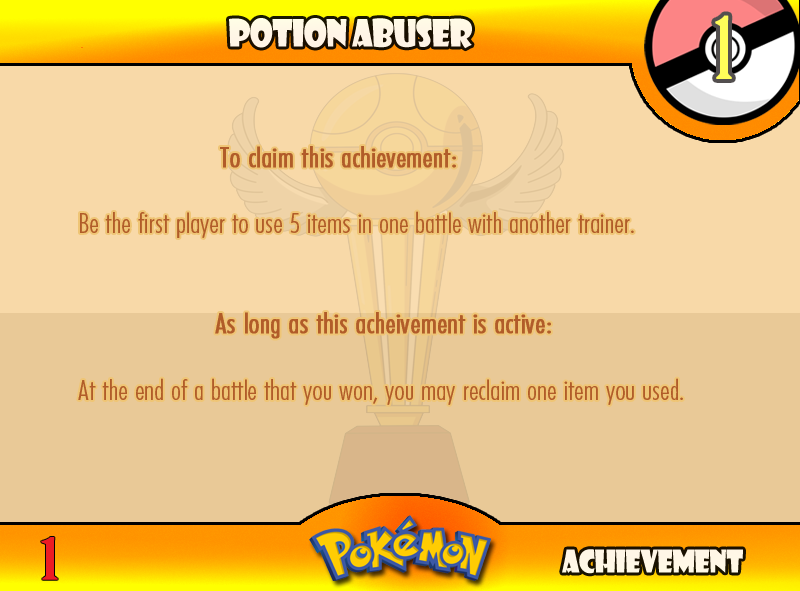
<style>
.page{position:relative;width:800px;height:591px;background:#f8d9a8}
.page>*{position:absolute;margin:0}
.t1{font:83.3px "BirchStd";letter-spacing:0.025em;color:#fffd59;font-weight:bold}
.t2{font:36.7px "ShowcardGothic-Reg";letter-spacing:-0.025em;color:#fff6e6;scale:0.91 1}
.t3{font:27.8px "FuturaCondensedBQ-Light";color:#b15c29;scale:1.08 1}
.t4{font:33.3px "FuturaCondensedBQ-Light";color:#b15c29;font-weight:bold;scale:1.08 1}
.t5{font:27.8px "FuturaCondensedBQ-Light";color:#b15c29;font-weight:bold;scale:1.08 1}
.t6{font:55.6px "BirchStd";color:#ed1c24;font-weight:bold;scale:1.5 1}
.t7{font:30.6px "ShowcardGothic-Reg";letter-spacing:-0.025em;color:#fff7e6;scale:0.91 1}
</style>
<div class="page">
<p class="t1" style="left:715px;top:15px;width:17px;height:64px">1</p>
<p class="t2" style="left:229px;top:18px;width:243px;height:31px">Potion Abuser</p>
<p class="t3" style="left:78px;top:146px;width:605px;height:259px"><span class="t4">          <br>      </span><span class="t5">To claim this achievement:<br><br></span> Be the first player to use 5 items in one battle with another trainer.<br><br><br><span class="t5">      As long as this acheivement is active:<br></span><br> At the end of a battle that you won, you may reclaim one item you used.</p>
<p class="t6" style="left:41px;top:537px;width:17px;height:43px">1</p>
<p class="t7" style="left:562px;top:549px;width:181px;height:25px">Achievement</p>
</div>
